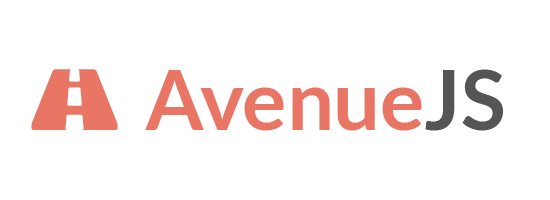
<style>
.page{position:relative;width:550px;height:200px;background:#ffffff}
.page>*{position:absolute;margin:0}
.t1{font:82.5px "Lato-Bold";color:#e97664}
.t2{font:82.5px "Lato-Bold";color:#555555}
</style>
<div class="page">
<p class="t1" style="left:145px;top:69px;width:358px;height:62px">Avenue<span class="t2">JS</span></p>
</div>
